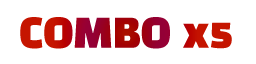
<style>
.page{position:relative;width:256px;height:64px;background:#ffffff}
.page>*{position:absolute;margin:0}
.t1{font:40px "BlackHanSans-Regular"}
</style>
<div class="page">
<p class="t1" style="left:20px;top:17px;width:212px;height:32px">COMBO x5</p>
</div>
